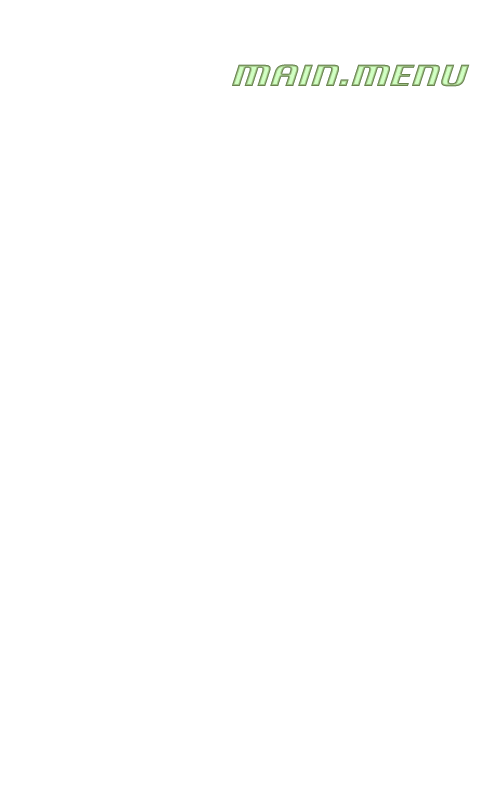
<style>
.page{position:relative;width:480px;height:800px;background:#ffffff}
.page>*{position:absolute;margin:0}
.t1{font:48px "Motorwerk"}
</style>
<div class="page">
<p class="t1" style="left:232px;top:64px;width:238px;height:23px">main.menu</p>
</div>
